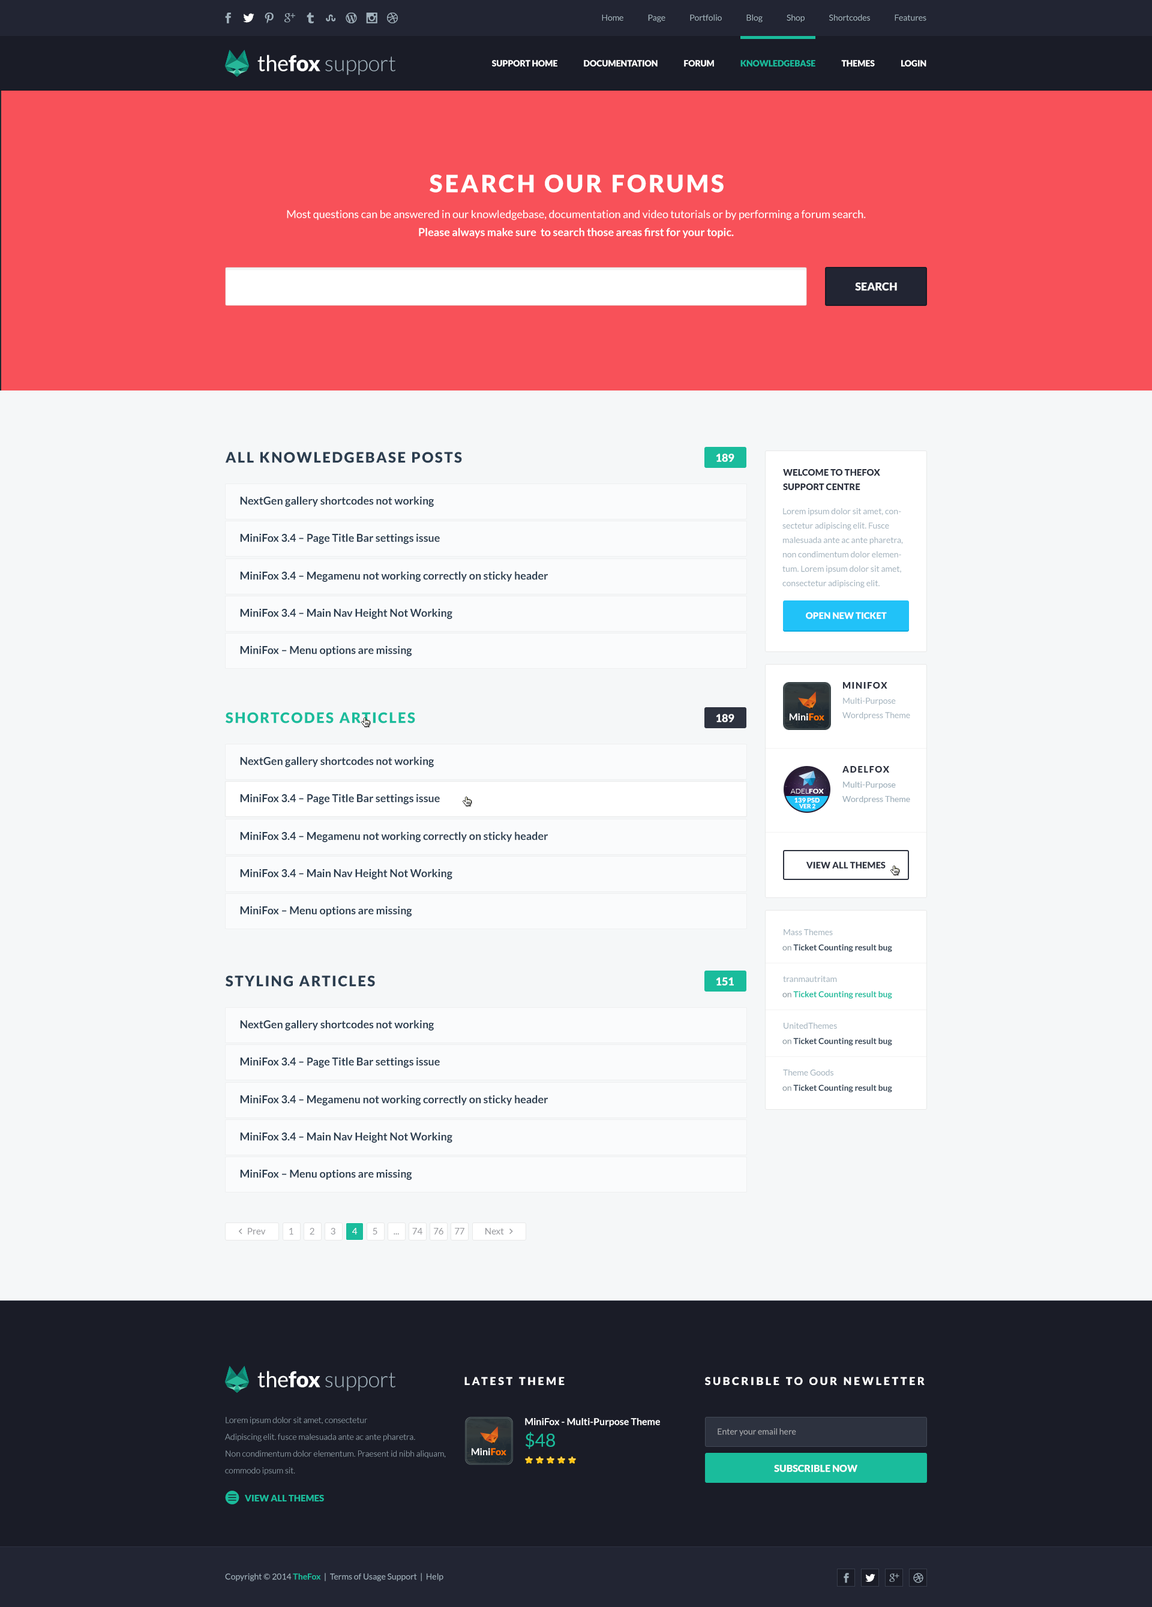
<style>
.page{position:relative;width:1152px;height:1607px;background:#f5f7f8}
.page>*{position:absolute;margin:0}
.t1{font:8.4px "Lato-Regular";color:#a1b1bc}
.t2{font:21.6px "Lato-Light";color:#a1b1bc}
.t3{font:21.6px "Lato-Regular";color:#ffffff}
.t4{font:21.6px "Lato-Black";color:#ffffff}
.t5{font:8.4px "Lato-Black";color:#ffffff;text-transform:uppercase}
.t6{font:8.4px "Lato-Black";color:#1abc9c;text-transform:uppercase}
.t7{font:24px "Lato-Black";letter-spacing:0.1em;color:#ffffff}
.t8{font:10.8px/18px "Lato-Regular";color:#ffffff}
.t9{font:10.8px/18px "Lato-Bold";color:#ffffff}
.t10{font:10.8px "Lato-Black";color:#ffffff}
.t11{font:14.4px "Lato-Black";letter-spacing:0.1em;color:#2c3e50;text-transform:uppercase}
.t12{font:9px/14.4px "Lato-Black";color:#2d323f;text-transform:uppercase}
.t13{font:10.8px "Lato-Bold";color:#2c3e50}
.t14{font:8.4px/14.4px "Lato-Regular";color:#a1b1bc}
.t15{font:10.8px "Lato-Bold";color:#2d323f}
.t16{font:9px "Lato-Black";color:#ffffff;text-transform:uppercase}
.t17{font:9px "Lato-Black";letter-spacing:0.1em;color:#2d323f;text-transform:uppercase}
.t18{font:14.4px "Lato-Black";letter-spacing:0.1em;color:#1abc9c;text-transform:uppercase}
.t19{font:9px "Lato-Black";color:#2d323f;text-transform:uppercase}
.t20{font:8.4px "Lato-Bold";color:#2c3e50}
.t21{font:8.4px "Lato-Regular";color:#829199}
.t22{font:8.4px "Lato-Bold";color:#1abc9c}
.t23{font:9px "Lato-Regular";color:#98999e}
.t24{font:9px "Lato-Regular";color:#ffffff}
.t25{font:10.8px "Lato-Black";letter-spacing:0.2em;color:#ffffff}
.t26{font:8.4px/16.8px "Lato-Light";color:#a1b1bc}
.t27{font:9.6px/21.6px "Lato-Bold";color:#ffffff}
.t28{font:18px/21.6px "Lato-Regular";color:#1abc9c}
.t29{font:8.4px "Lato-Regular";color:#acadb0}
.t30{font:9.6px "Lato-Black";color:#ffffff}
.t31{font:9px "Lato-Black";color:#1abc9c}
</style>
<div class="page">
<p class="t1" style="left:602px;top:14px;width:324px;height:8px">Home               Page               Portfolio               Blog               Shop               Shortcodes               Features</p>
<p class="t2" style="left:257px;top:55px;width:138px;height:20px"><span class="t3">the</span><span class="t4">fox </span>support</p>
<p class="t5" style="left:492px;top:60px;width:434px;height:7px">SUPPORT HOME                DOCUMENTATION                FORUM                <span class="t6">KNOWLEDGEBASE</span>                THEMES                LOGIN</p>
<p class="t7" style="left:430px;top:175px;width:294px;height:18px">SEARCH OUR FORUMS</p>
<p class="t8" style="left:287px;top:210px;width:579px;height:28px;text-align:center">Most questions can be answered in our knowledgebase, documentation and video tutorials or by performing a forum search. <br><span class="t9">Please always make sure  to search those areas first for your topic.</span></p>
<p class="t10" style="left:855px;top:283px;width:42px;height:8px">SEARCH</p>
<p class="t11" style="left:225px;top:452px;width:237px;height:11px">All Knowledgebase Posts</p>
<p class="t10" style="left:716px;top:454px;width:18px;height:8px">189</p>
<p class="t12" style="left:783px;top:469px;width:97px;height:21px">welcome to THEFOX<br>SUPPORT CENTRE</p>
<p class="t13" style="left:240px;top:496px;width:194px;height:11px">NextGen gallery shortcodes not working</p>
<p class="t14" style="left:782px;top:508px;width:121px;height:80px">Lorem ipsum dolor sit amet, consectetur adipiscing elit. Fusce malesuada ante ac ante pharetra, non condimentum dolor elementum. Lorem ipsum dolor sit amet, consectetur adipiscing elit.</p>
<p class="t15" style="left:240px;top:533px;width:200px;height:11px">MiniFox 3.4 – Page Title Bar settings issue</p>
<p class="t15" style="left:240px;top:571px;width:308px;height:11px">MiniFox 3.4 – Megamenu not working correctly on sticky header</p>
<p class="t15" style="left:240px;top:608px;width:212px;height:11px">MiniFox 3.4 – Main Nav Height Not Working</p>
<p class="t16" style="left:806px;top:612px;width:81px;height:7px">OPEN NEW TICKET</p>
<p class="t15" style="left:240px;top:646px;width:172px;height:10px">MiniFox – Menu options are missing</p>
<p class="t17" style="left:843px;top:682px;width:44px;height:7px">MINIFOX</p>
<p class="t14" style="left:842px;top:698px;width:68px;height:22px">Multi-Purpose Wordpress Theme</p>
<p class="t18" style="left:226px;top:712px;width:189px;height:12px">ShortCodeS Articles</p>
<p class="t10" style="left:716px;top:714px;width:18px;height:8px">189</p>
<p class="t15" style="left:240px;top:757px;width:194px;height:10px">NextGen gallery shortcodes not working</p>
<p class="t17" style="left:842px;top:766px;width:47px;height:7px">ADELFOX</p>
<p class="t14" style="left:842px;top:782px;width:68px;height:21px">Multi-Purpose Wordpress Theme</p>
<p class="t15" style="left:240px;top:794px;width:200px;height:11px">MiniFox 3.4 – Page Title Bar settings issue</p>
<p class="t15" style="left:240px;top:832px;width:308px;height:10px">MiniFox 3.4 – Megamenu not working correctly on sticky header</p>
<p class="t15" style="left:240px;top:869px;width:212px;height:11px">MiniFox 3.4 – Main Nav Height Not Working</p>
<p class="t19" style="left:806px;top:862px;width:80px;height:7px">view all themes</p>
<p class="t15" style="left:240px;top:906px;width:172px;height:11px">MiniFox – Menu options are missing</p>
<p class="t1" style="left:784px;top:929px;width:49px;height:6px">Mass Themes</p>
<p class="t20" style="left:782px;top:944px;width:110px;height:8px"><span class="t21">on </span>Ticket Counting result bug</p>
<p class="t11" style="left:226px;top:976px;width:149px;height:11px">Styling Articles</p>
<p class="t10" style="left:716px;top:977px;width:18px;height:9px">151</p>
<p class="t1" style="left:783px;top:976px;width:54px;height:6px">tranmautritam</p>
<p class="t22" style="left:782px;top:991px;width:110px;height:8px"><span class="t21">on </span>Ticket Counting result bug</p>
<p class="t15" style="left:240px;top:1020px;width:194px;height:11px">NextGen gallery shortcodes not working</p>
<p class="t1" style="left:784px;top:1022px;width:53px;height:7px">UnitedThemes</p>
<p class="t20" style="left:782px;top:1038px;width:110px;height:8px"><span class="t21">on </span>Ticket Counting result bug</p>
<p class="t15" style="left:240px;top:1057px;width:200px;height:11px">MiniFox 3.4 – Page Title Bar settings issue</p>
<p class="t1" style="left:783px;top:1069px;width:50px;height:7px">Theme Goods</p>
<p class="t20" style="left:782px;top:1085px;width:110px;height:8px"><span class="t21">on </span>Ticket Counting result bug</p>
<p class="t15" style="left:240px;top:1095px;width:308px;height:11px">MiniFox 3.4 – Megamenu not working correctly on sticky header</p>
<p class="t15" style="left:240px;top:1132px;width:212px;height:11px">MiniFox 3.4 – Main Nav Height Not Working</p>
<p class="t15" style="left:240px;top:1169px;width:172px;height:11px">MiniFox – Menu options are missing</p>
<p class="t23" style="left:248px;top:1228px;width:18px;height:7px">Prev</p>
<p class="t23" style="left:289px;top:1228px;width:4px;height:7px">1</p>
<p class="t23" style="left:310px;top:1228px;width:4px;height:7px">2</p>
<p class="t23" style="left:331px;top:1228px;width:4px;height:7px">3</p>
<p class="t24" style="left:352px;top:1228px;width:6px;height:7px">4</p>
<p class="t23" style="left:373px;top:1228px;width:4px;height:7px">5</p>
<p class="t23" style="left:412px;top:1228px;width:10px;height:7px">74</p>
<p class="t23" style="left:434px;top:1228px;width:9px;height:7px">76</p>
<p class="t23" style="left:455px;top:1228px;width:9px;height:7px">77</p>
<p class="t23" style="left:485px;top:1228px;width:19px;height:7px">Next</p>
<p class="t23" style="left:394px;top:1234px;width:5px;height:1px">...</p>
<p class="t2" style="left:257px;top:1371px;width:138px;height:20px"><span class="t3">the</span><span class="t4">fox </span>support</p>
<p class="t25" style="left:464px;top:1377px;width:101px;height:9px">LATEST THEME</p>
<p class="t25" style="left:705px;top:1377px;width:220px;height:9px">SUBCRIBLE TO OUR NEWLETTER</p>
<p class="t26" style="left:225px;top:1417px;width:221px;height:58px">Lorem ipsum dolor sit amet, consectetur <br>Adipiscing elit. fusce malesuada ante ac ante pharetra.<br>Non condimentum dolor elementum. Praesent id nibh aliquam, commodo ipsum sit.</p>
<p class="t27" style="left:525px;top:1418px;width:135px;height:32px">MiniFox - Multi-Purpose Theme<br><span class="t28">$48</span></p>
<p class="t29" style="left:718px;top:1429px;width:78px;height:7px">Enter your email here</p>
<p class="t30" style="left:774px;top:1465px;width:83px;height:7px">SUBSCRIBLE NOW</p>
<p class="t31" style="left:245px;top:1495px;width:79px;height:7px">VIEW ALL THEMES</p>
<p class="t1" style="left:225px;top:1573px;width:218px;height:9px">Copyright © 2014 <span class="t22">TheFox  </span>|  Terms of Usage Support  |  Help</p>
</div>
